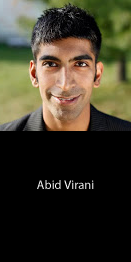
<style>
.page{position:relative;width:131px;height:262px;background:#000000}
.page>*{position:absolute;margin:0}
.t1{font:12.5px "MyriadPro-Regular";color:#ffffff}
</style>
<div class="page">
<p class="t1" style="left:37px;top:180px;width:57px;height:9px">Abid Virani</p>
</div>
